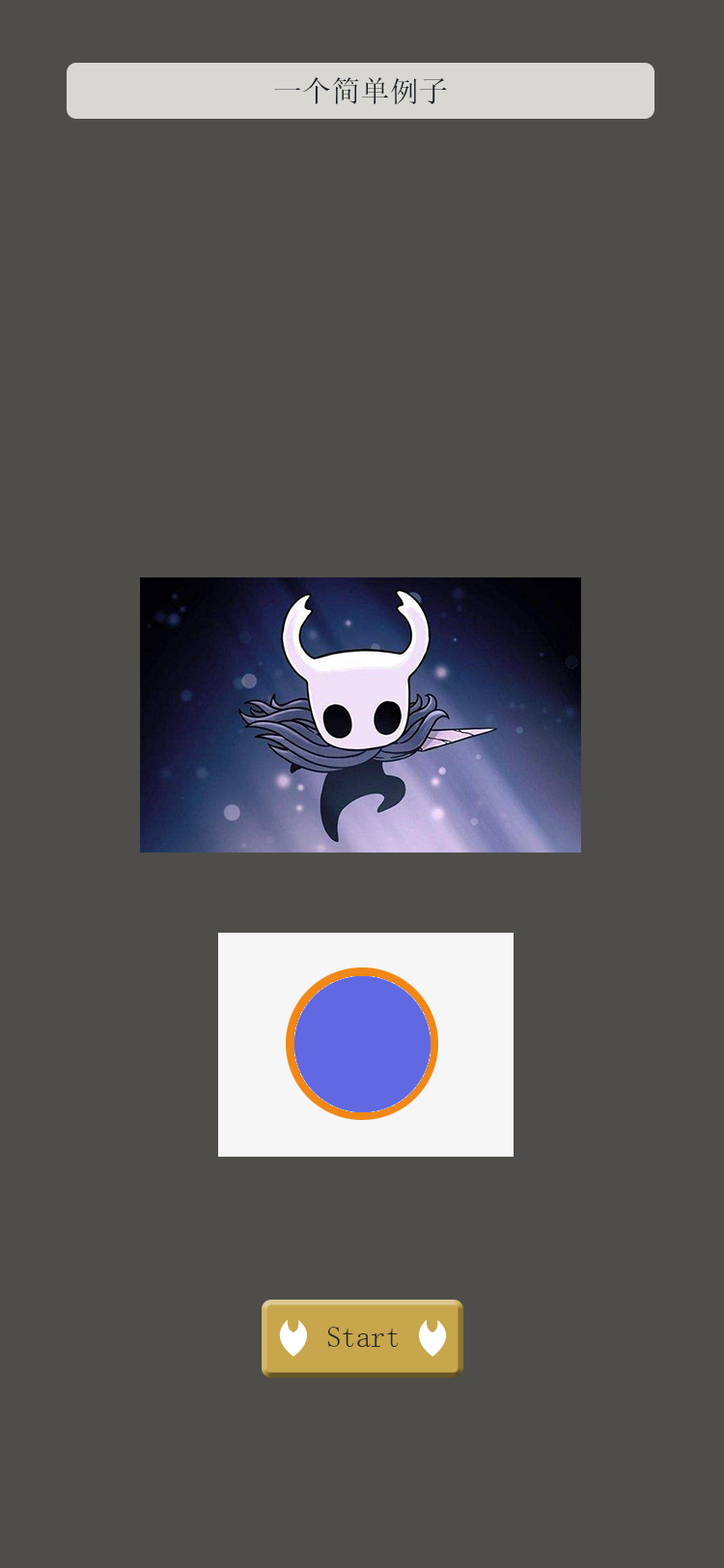
<style>
.page{position:relative;width:724px;height:1568px;background:#4e4d4a}
.page>*{position:absolute;margin:0}
.t1{font:29px "SimSun";letter-spacing:0.007em;color:#141e26}
.t2{font:29px "SimSun";letter-spacing:0.007em;color:#272726}
</style>
<div class="page">
<p class="t1" style="left:274px;top:77px;width:173px;height:27px">一个简单例子</p>
<p class="t2" style="left:327px;top:1327px;width:72px;height:20px">Start</p>
</div>
